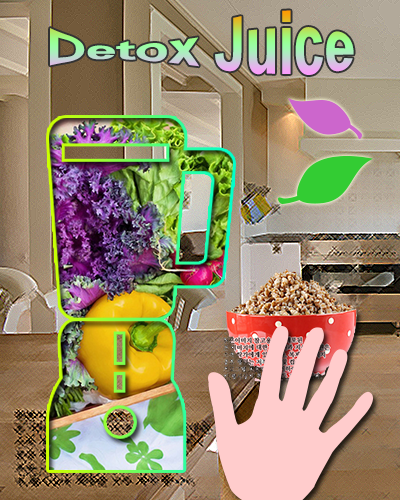
<style>
.page{position:relative;width:400px;height:500px}
.page>*{position:absolute;margin:0}
.t1{font:55.1px "Arial-BoldMT"}
</style>
<div class="page">
<p class="t1" style="left:50px;top:10px;width:304px;height:65px">Detox Juice</p>
</div>
